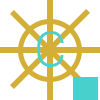
<style>
.page{position:relative;width:100px;height:100px;background:#ffffff}
.page>*{position:absolute;margin:0}
.t1{font:50px "Roboto-Light";color:#48d1cc}
</style>
<div class="page">
<p class="t1" style="left:37px;top:31px;width:27px;height:36px">C</p>
</div>
